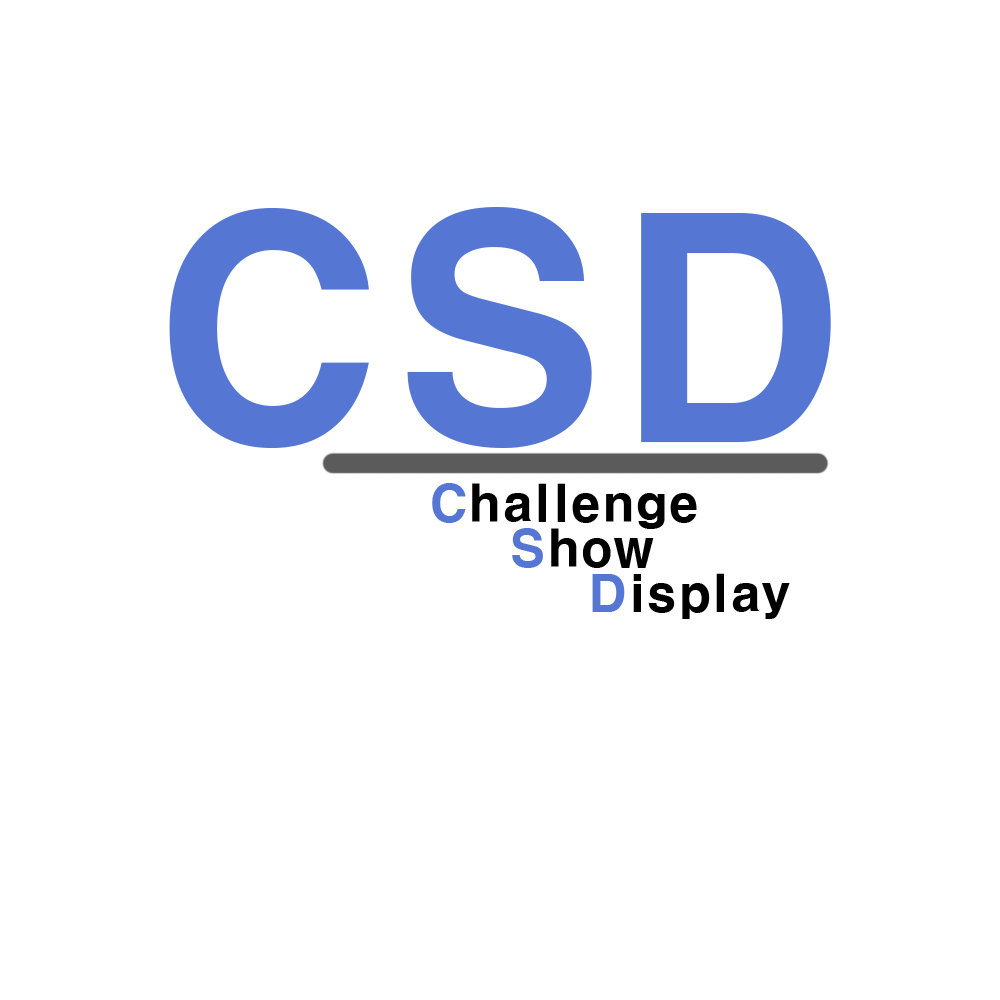
<style>
.page{position:relative;width:1000px;height:1000px;background:#ffffff}
.page>*{position:absolute;margin:0}
.t1{font:300px "H2gtrE";color:#5576d3}
.t2{font:50px/45px "H2gtrE";color:#000000}
.t3{font:50px/45px "H2gtrE";color:#5576d3}
</style>
<div class="page">
<p class="t1" style="left:169px;top:207px;width:662px;height:241px">CSD</p>
<p class="t2" style="left:432px;top:483px;width:358px;height:136px;text-align:center"><span class="t3">C</span>hallenge<br> <span class="t3">S</span>how<br>       <span class="t3">D</span>isplay</p>
</div>
